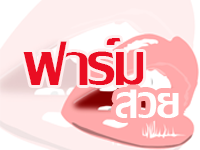
<style>
.page{position:relative;width:200px;height:150px;background:#feeeee}
.page>*{position:absolute;margin:0}
.t1{font:83.3px "LilyUPC";color:#ea0d22;scale:1.03 1}
.t2{font:62.5px "LilyUPC";color:#fffefe;scale:1.03 1}
</style>
<div class="page">
<p class="t1" style="left:23px;top:38px;width:121px;height:47px">ฟาร์ม</p>
<p class="t2" style="left:115px;top:89px;width:64px;height:29px">สวย</p>
</div>
